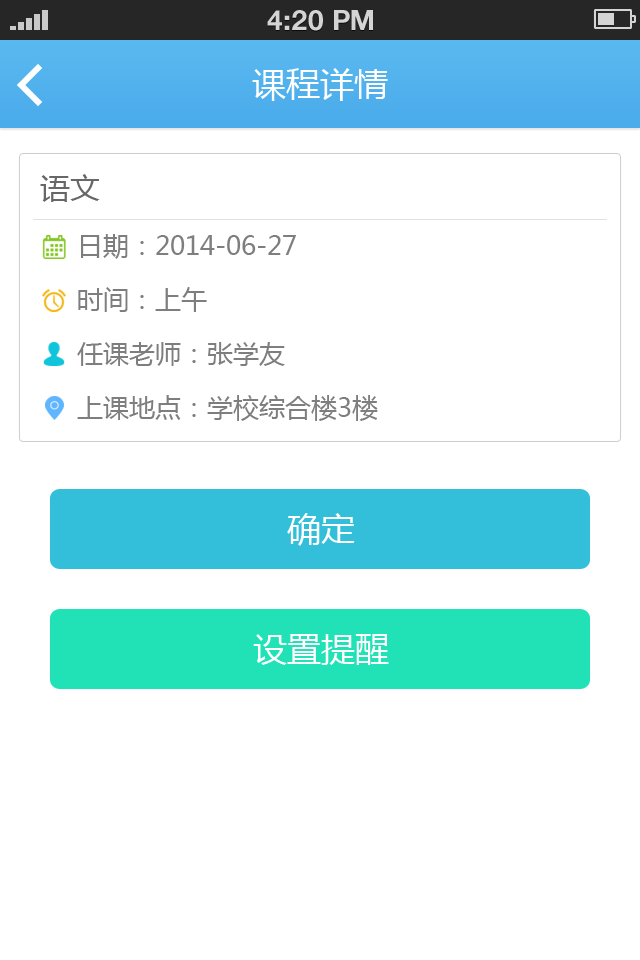
<style>
.page{position:relative;width:640px;height:960px;background:#ffffff}
.page>*{position:absolute;margin:0}
.t1{font:28px "HelveticaNeueLTStd-Bd";color:#d4d4d4;text-transform:uppercase}
.t2{font:34px "MicrosoftYaHei";color:#ffffff}
.t3{font:30px "MicrosoftYaHei";color:#676767}
.t4{font:26px/54px "MicrosoftYaHei";color:#7e7e7e}
</style>
<div class="page">
<p class="t1" style="left:267px;top:10px;width:106px;height:21px">4:20 PM</p>
<p class="t2" style="left:252px;top:68px;width:136px;height:33px">课程详情</p>
<p class="t3" style="left:40px;top:174px;width:60px;height:28px">语文</p>
<p class="t4" style="left:77px;top:234px;width:301px;height:187px">日期：2014-06-27<br>时间：上午<br>任课老师：张学友<br>上课地点：学校综合楼3楼</p>
<p class="t2" style="left:287px;top:513px;width:68px;height:33px">确定</p>
<p class="t2" style="left:253px;top:634px;width:136px;height:31px">设置提醒</p>
</div>
